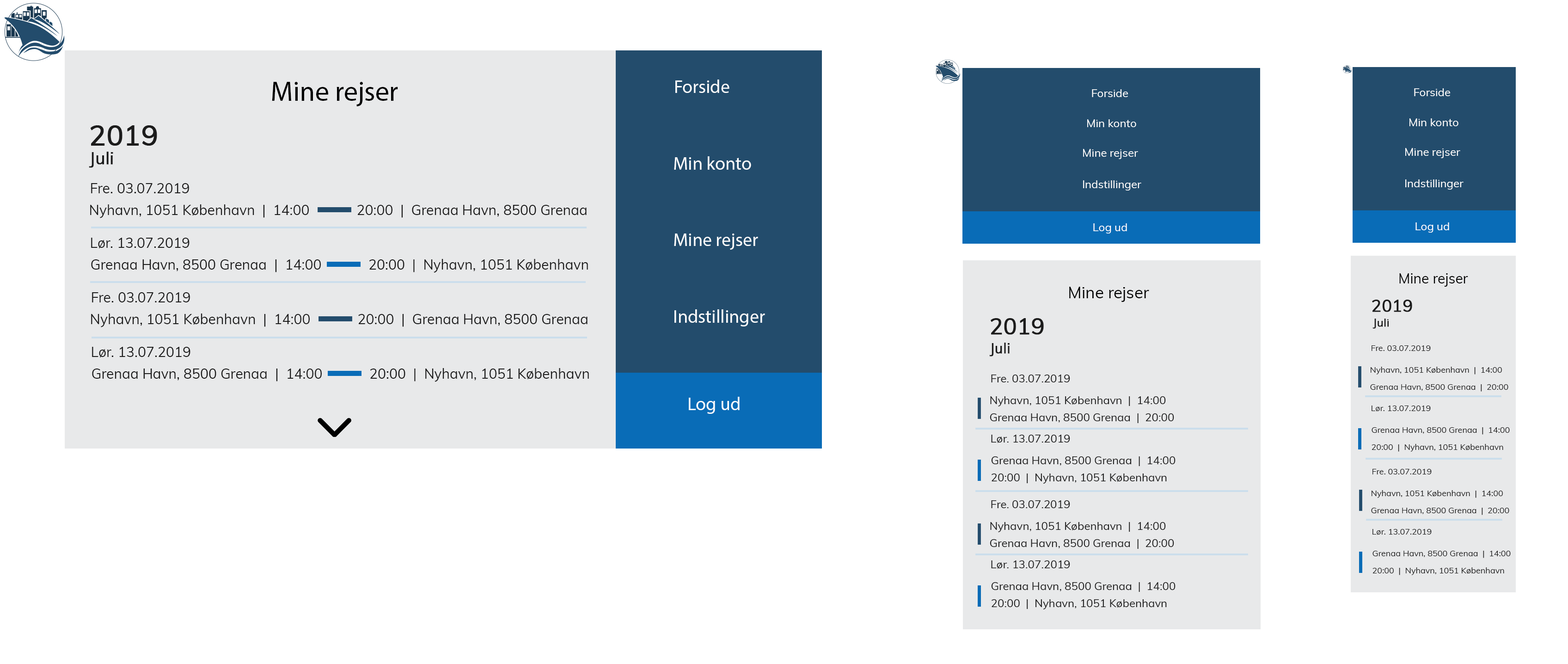
<style>
.page{position:relative;width:1568px;height:664px;background:#ffffff}
.page>*{position:absolute;margin:0}
.t1{font:27.7px "MyriadPro-Regular";color:#000000}
.t2{font:18.5px "MyriadPro-Regular";color:#ffffff}
.t3{font:11.1px "Muli-Regular";color:#ffffff}
.t4{font:27.7px "Muli-Regular";color:#1c1c1c;font-weight:bold}
.t5{font:16.6px "Muli-Regular";color:#1c1c1c;font-weight:bold}
.t6{font:13.9px "Muli-Regular";color:#1c1c1c}
.t7{font:13.9px "Muli-Regular";color:#000000}
.t8{font:16.2px "Muli-Regular";color:#000000}
.t9{font:22.2px "Muli-Regular";color:#1c1c1c;font-weight:bold}
.t10{font:11.1px "Muli-Regular";color:#1c1c1c;font-weight:bold}
.t11{font:13.9px "Muli-Regular";color:#1c1c1c;font-weight:bold}
.t12{font:8.3px "Muli-Regular";color:#1c1c1c}
.t13{font:11.1px "Muli-Regular";color:#1c1c1c}
.t14{font:8.3px/17.1px "Muli-Regular";color:#1c1c1c}
.t15{font:11.1px/17.1px "Muli-Regular";color:#1c1c1c}
</style>
<div class="page">
<p class="t1" style="left:272px;top:82px;width:126px;height:24px">Mine rejser</p>
<p class="t2" style="left:675px;top:80px;width:54px;height:13px">Forside</p>
<p class="t3" style="left:1092px;top:89px;width:36px;height:8px">Forside</p>
<p class="t3" style="left:1414px;top:88px;width:37px;height:8px">Forside</p>
<p class="t4" style="left:90px;top:125px;width:67px;height:21px">2019</p>
<p class="t3" style="left:1087px;top:119px;width:49px;height:8px">Min konto</p>
<p class="t3" style="left:1409px;top:118px;width:49px;height:8px">Min konto</p>
<p class="t3" style="left:1083px;top:149px;width:55px;height:10px">Mine rejser</p>
<p class="t3" style="left:1405px;top:148px;width:55px;height:10px">Mine rejser</p>
<p class="t5" style="left:89px;top:152px;width:24px;height:16px">Juli</p>
<p class="t2" style="left:674px;top:156px;width:77px;height:14px">Min konto</p>
<p class="t6" style="left:91px;top:183px;width:98px;height:10px">Fre. 03.07.2019</p>
<p class="t3" style="left:1083px;top:180px;width:58px;height:10px">Indstillinger</p>
<p class="t3" style="left:1405px;top:179px;width:59px;height:11px">Indstillinger</p>
<p class="t6" style="left:90px;top:204px;width:497px;height:14px">Nyhavn, 1051 København  |  14:00             20:00  |  Grenaa Havn, 8500 Grenaa</p>
<p class="t2" style="left:674px;top:233px;width:84px;height:17px">Mine rejser</p>
<p class="t3" style="left:1093px;top:223px;width:34px;height:10px">Log ud</p>
<p class="t3" style="left:1415px;top:222px;width:34px;height:11px">Log ud</p>
<p class="t6" style="left:91px;top:238px;width:99px;height:11px">Lør. 13.07.2019</p>
<p class="t6" style="left:91px;top:259px;width:497px;height:14px">Grenaa Havn, 8500 Grenaa  |  14:00             20:00  |  Nyhavn, 1051 København</p>
<p class="t7" style="left:1399px;top:273px;width:69px;height:14px">Mine rejser</p>
<p class="t6" style="left:92px;top:292px;width:98px;height:10px">Fre. 03.07.2019</p>
<p class="t8" style="left:1069px;top:287px;width:80px;height:15px">Mine rejser</p>
<p class="t5" style="left:1372px;top:300px;width:40px;height:12px">2019</p>
<p class="t6" style="left:91px;top:313px;width:497px;height:14px">Nyhavn, 1051 København  |  14:00             20:00  |  Grenaa Havn, 8500 Grenaa</p>
<p class="t2" style="left:674px;top:309px;width:91px;height:17px">Indstillinger</p>
<p class="t9" style="left:991px;top:318px;width:53px;height:17px">2019</p>
<p class="t10" style="left:1372px;top:318px;width:17px;height:11px">Juli</p>
<p class="t6" style="left:92px;top:347px;width:98px;height:11px">Lør. 13.07.2019</p>
<p class="t11" style="left:989px;top:343px;width:21px;height:13px">Juli</p>
<p class="t12" style="left:1372px;top:345px;width:59px;height:6px">Fre. 03.07.2019</p>
<p class="t6" style="left:92px;top:368px;width:497px;height:14px">Grenaa Havn, 8500 Grenaa  |  14:00             20:00  |  Nyhavn, 1051 København</p>
<p class="t13" style="left:991px;top:374px;width:79px;height:8px">Fre. 03.07.2019</p>
<p class="t14" style="left:1370px;top:367px;width:138px;height:25px">Nyhavn, 1051 København  |  14:00<br>Grenaa Havn, 8500 Grenaa  |  20:00</p>
<p class="t2" style="left:689px;top:397px;width:51px;height:17px">Log ud</p>
<p class="t15" style="left:990px;top:396px;width:184px;height:27px">Nyhavn, 1051 København  |  14:00<br>Grenaa Havn, 8500 Grenaa  |  20:00</p>
<p class="t12" style="left:1372px;top:405px;width:59px;height:6px">Lør. 13.07.2019</p>
<p class="t13" style="left:991px;top:435px;width:79px;height:8px">Lør. 13.07.2019</p>
<p class="t14" style="left:1372px;top:427px;width:138px;height:25px">Grenaa Havn, 8500 Grenaa  |  14:00<br>20:00  |  Nyhavn, 1051 København</p>
<p class="t15" style="left:991px;top:456px;width:185px;height:28px">Grenaa Havn, 8500 Grenaa  |  14:00<br>20:00  |  Nyhavn, 1051 København</p>
<p class="t12" style="left:1372px;top:469px;width:60px;height:5px">Fre. 03.07.2019</p>
<p class="t14" style="left:1371px;top:490px;width:138px;height:25px">Nyhavn, 1051 København  |  14:00<br>Grenaa Havn, 8500 Grenaa  |  20:00</p>
<p class="t13" style="left:991px;top:500px;width:79px;height:8px">Fre. 03.07.2019</p>
<p class="t15" style="left:990px;top:522px;width:184px;height:27px">Nyhavn, 1051 København  |  14:00<br>Grenaa Havn, 8500 Grenaa  |  20:00</p>
<p class="t12" style="left:1372px;top:529px;width:60px;height:6px">Lør. 13.07.2019</p>
<p class="t14" style="left:1372px;top:551px;width:139px;height:24px">Grenaa Havn, 8500 Grenaa  |  14:00<br>20:00  |  Nyhavn, 1051 København</p>
<p class="t13" style="left:991px;top:560px;width:79px;height:9px">Lør. 13.07.2019</p>
<p class="t15" style="left:991px;top:582px;width:185px;height:27px">Grenaa Havn, 8500 Grenaa  |  14:00<br>20:00  |  Nyhavn, 1051 København</p>
</div>
